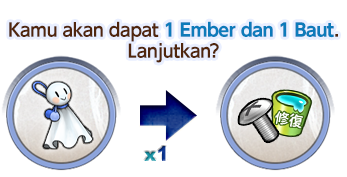
<style>
.page{position:relative;width:347px;height:177px;background:#ffffff}
.page>*{position:absolute;margin:0}
.t1{font:18px/21px "UDShinGoPro-Bold";letter-spacing:-0.04em;color:#0d7bba}
.t2{font:18px/21px "UDShinGoPro-DeBold";letter-spacing:-0.04em;color:#50260d}
</style>
<div class="page">
<p class="t1" style="left:9px;top:21px;width:329px;height:42px;text-align:center"><span class="t2">Kamu akan dapat </span>1 Ember dan 1 Baut<span class="t2">.<br>Lanjutkan?</span></p>
</div>
